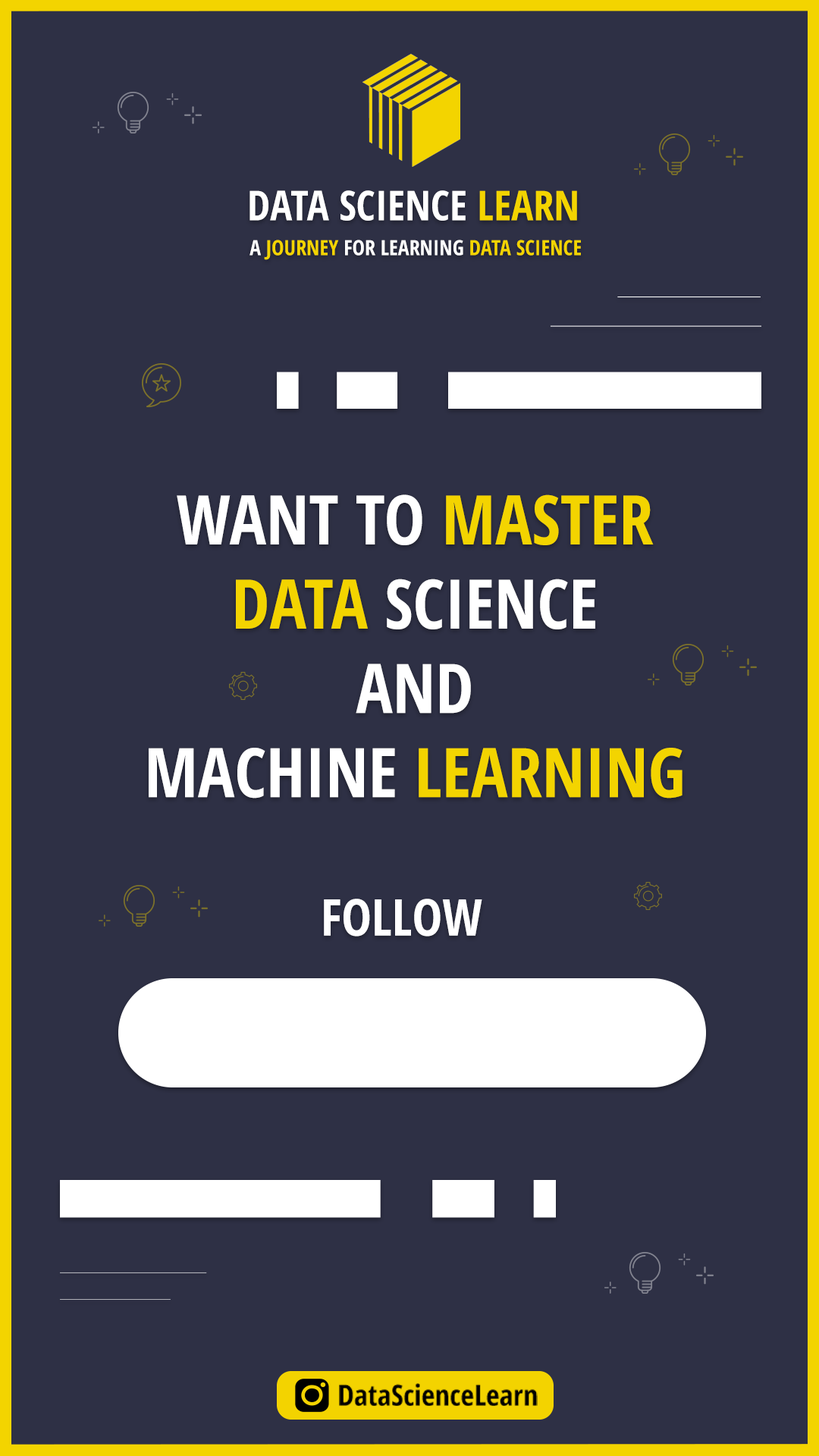
<style>
.page{position:relative;width:819px;height:1456px;background:#2e3045}
.page>*{position:absolute;margin:0}
.t1{font:41.1px "OpenSans-CondensedBold";color:#ffffff}
.t2{font:41.1px "OpenSans-CondensedBold";color:#f3d400}
.t3{font:21.1px "OpenSans-CondensedBold";color:#ffffff}
.t4{font:21.1px "OpenSans-CondensedBold";color:#f3d400}
.t5{font:68.5px/84.3px "OpenSans-CondensedBold";color:#ffffff}
.t6{font:68.5px/84.3px "OpenSans-CondensedBold";color:#f3d400}
.t7{font:50.6px "OpenSans-CondensedBold";color:#ffffff}
.t8{font:29.4px "OpenSans-CondensedBold";color:#000000}
</style>
<div class="page">
<p class="t1" style="left:249px;top:190px;width:328px;height:31px">DATA SCIENCE <span class="t2">LEARN</span></p>
<p class="t3" style="left:249px;top:240px;width:332px;height:20px">A <span class="t4">JOURNEY</span> FOR LEARNING <span class="t4">DATA SCIENCE</span></p>
<p class="t5" style="left:149px;top:494px;width:533px;height:305px;text-align:center">WANT TO <span class="t6">MASTER<br>DATA </span>SCIENCE<br>AND<br>MACHINE <span class="t6">LEARNING</span></p>
<p class="t7" style="left:324px;top:899px;width:158px;height:38px">FOLLOW</p>
<p class="t8" style="left:339px;top:1383px;width:199px;height:23px">DataScienceLearn</p>
</div>
